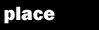
<style>
.page{position:relative;width:99px;height:30px;background:#000000}
.page>*{position:absolute;margin:0}
.t1{font:19.9px "FranklinGothic-Heavy";color:#ffffff}
</style>
<div class="page">
<p class="t1" style="left:4px;top:6px;width:51px;height:18px">place</p>
</div>
